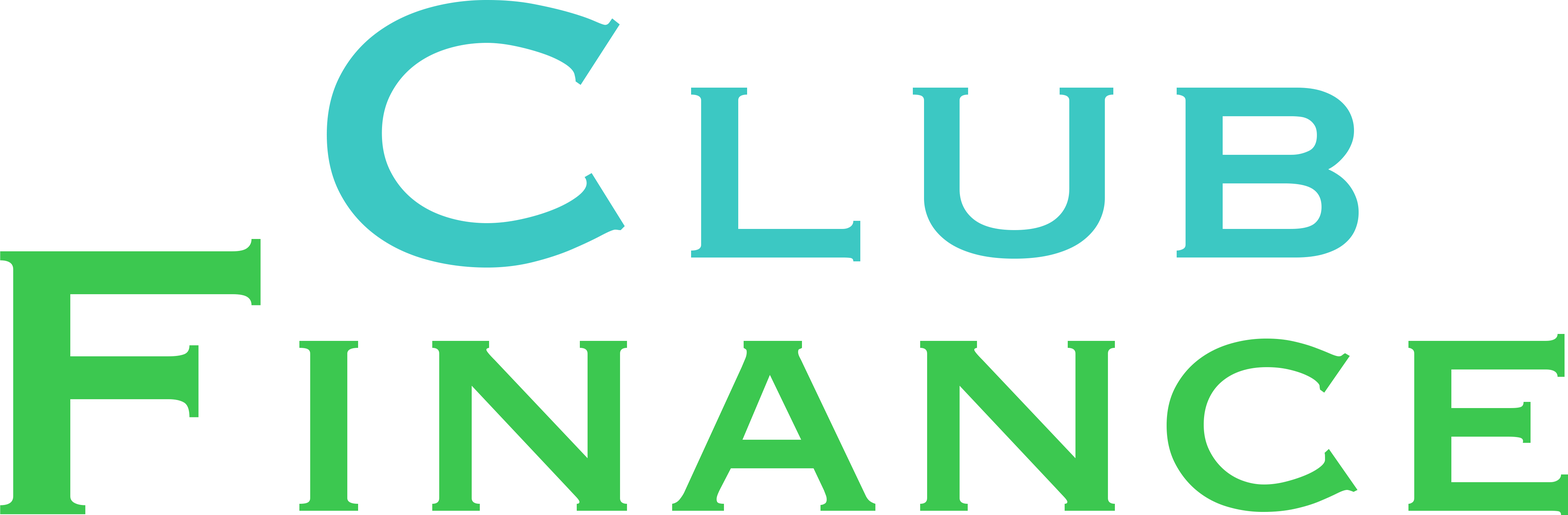
<style>
.page{position:relative;width:1568px;height:515px;background:#ffffff}
.page>*{position:absolute;margin:0}
.t1{font:500.6px "Copperplate";letter-spacing:0.02em;color:#3cc8c3}
.t2{font:386.3px "Copperplate";letter-spacing:0.02em;color:#3cc8c3}
.t3{font:500.6px "Copperplate";letter-spacing:0.02em;color:#3cc850}
.t4{font:386.3px "Copperplate";letter-spacing:0.02em;color:#3cc850}
</style>
<div class="page">
<p class="t1" style="left:326px;top:0px;width:299px;height:268px">C</p>
<p class="t2" style="left:691px;top:88px;width:668px;height:174px">lub</p>
<p class="t3" style="left:0px;top:239px;width:261px;height:276px">F</p>
<p class="t4" style="left:299px;top:334px;width:1269px;height:181px">inance</p>
</div>
